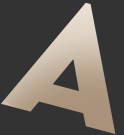
<style>
.page{position:relative;width:124px;height:135px;background:#333333}
.page>*{position:absolute;margin:0}
.t1{font:192.3px "AcierBATText-Solid";letter-spacing:0.5em}
</style>
<div class="page">
<p class="t1" style="left:0px;top:2px;width:116px;height:132px;rotate:15deg">a</p>
</div>
